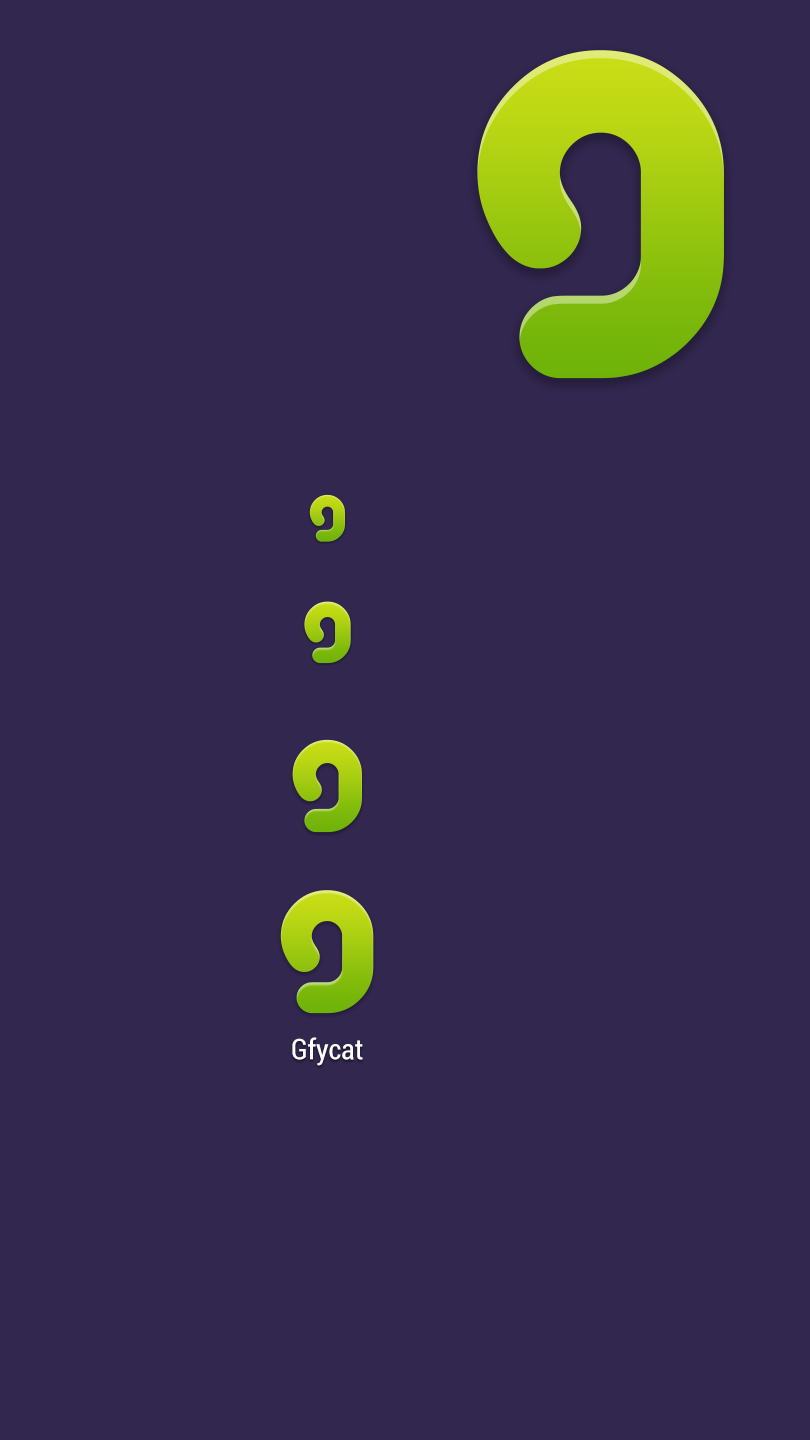
<style>
.page{position:relative;width:810px;height:1440px;background:#32274f}
.page>*{position:absolute;margin:0}
.t1{font:28.5px "Roboto-Condensed";color:#ffffff}
</style>
<div class="page">
<p class="t1" style="left:292px;top:1037px;width:71px;height:29px">Gfycat</p>
</div>
